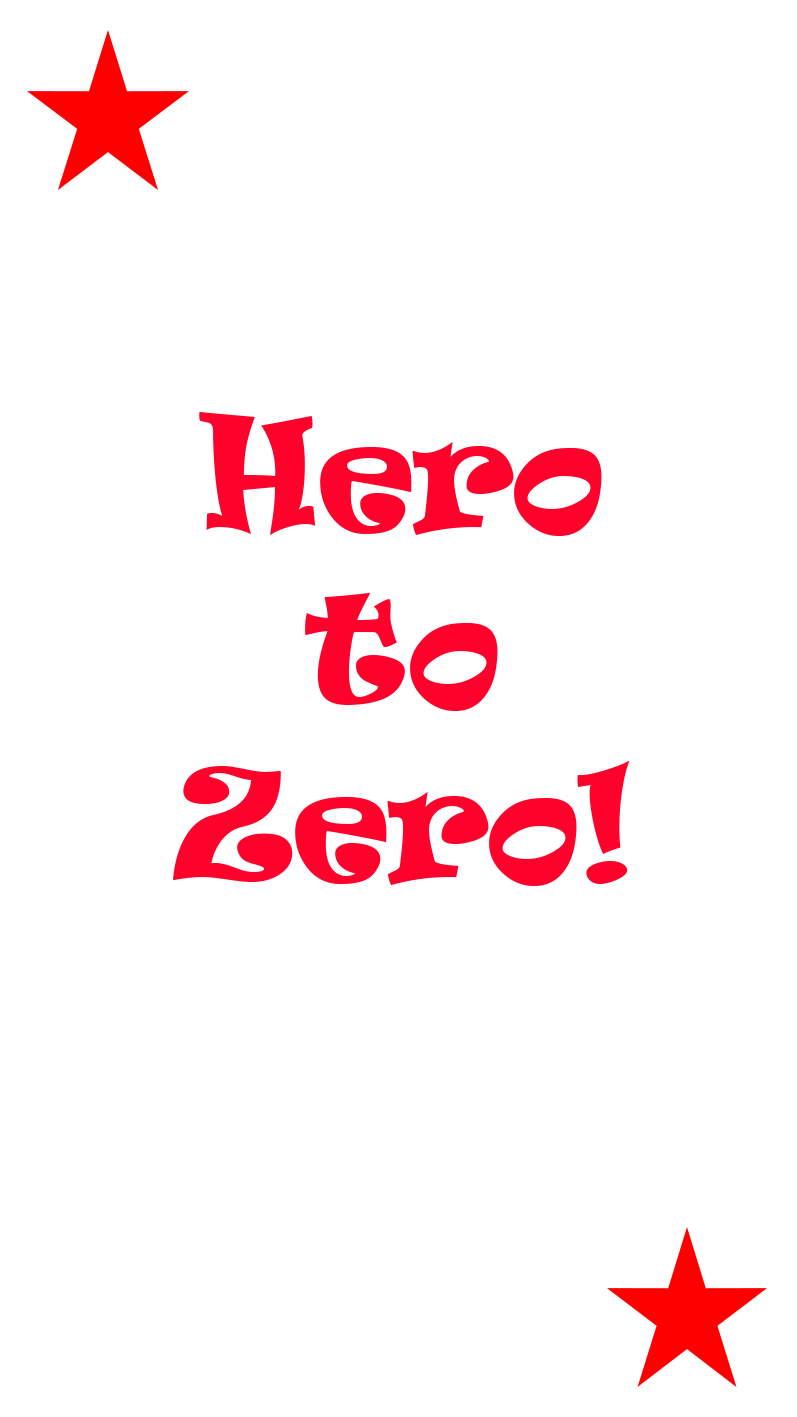
<style>
.page{position:relative;width:797px;height:1417px;background:#ffffff}
.page>*{position:absolute;margin:0}
.t1{font:145.8px "Ravie";color:#fe022c;scale:0.89 1}
</style>
<div class="page">
<p class="t1" style="left:173px;top:412px;width:457px;height:474px;text-align:center">Hero<br>to<br>Zero!</p>
</div>
